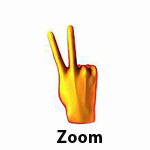
<style>
.page{position:relative;width:150px;height:150px;background:#fdfdfd}
.page>*{position:absolute;margin:0}
.t1{font:18px "MyriadPro-Bold";color:#090909}
.t2{font:14px "MyriadPro-Bold";color:#090909}
</style>
<div class="page">
<p class="t1" style="left:57px;top:130px;width:45px;height:13px"><span class="t2">   </span>Zoom</p>
</div>
